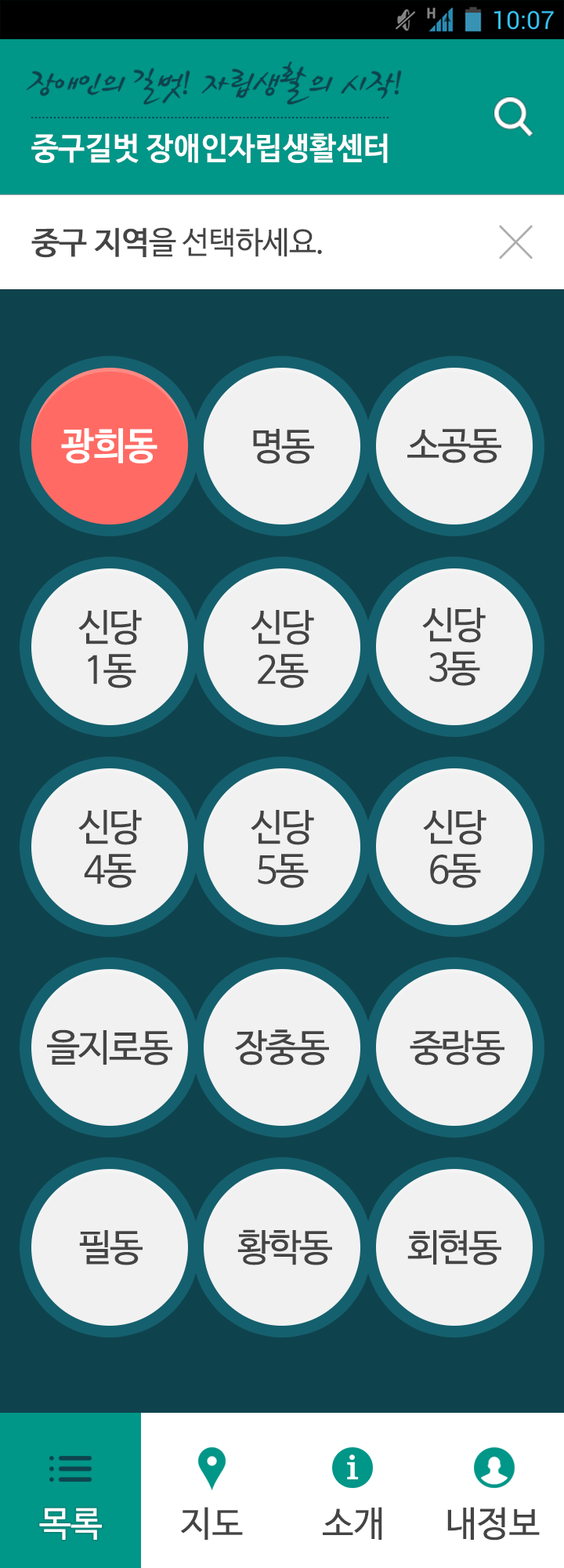
<style>
.page{position:relative;width:564px;height:1568px;background:#0e434d}
.page>*{position:absolute;margin:0}
.t1{font:31.4px "NanumBarunGothicOTFBold";letter-spacing:0.01em;color:#ffffff;scale:0.96 1}
.t2{font:31.4px "NanumBarunGothicOTF";letter-spacing:-0.02em;color:#444444}
.t3{font:31.4px "NanumBarunGothicOTF";letter-spacing:-0.02em;color:#444444;font-weight:bold}
.t4{font:37.6px "NanumBarunGothicOTFBold";letter-spacing:-0.025em;color:#ffffff}
.t5{font:37.6px "NanumBarunGothicOTF";letter-spacing:-0.05em;color:#444444}
.t6{font:37.6px/43.1px "NanumBarunGothicOTF";letter-spacing:-0.05em;color:#444444}
.t7{font:35.3px "NanumBarunGothicOTF";color:#ffffff}
.t8{font:35.3px "NanumBarunGothicOTF";color:#444444}
</style>
<div class="page">
<p class="t1" style="left:31px;top:133px;width:357px;height:30px">중구길벗 장애인자립생활센터</p>
<p class="t2" style="left:31px;top:227px;width:291px;height:31px"><span class="t3">중구 지역</span>을 선택하세요.</p>
<p class="t4" style="left:61px;top:428px;width:97px;height:35px">광희동</p>
<p class="t5" style="left:253px;top:429px;width:61px;height:35px">명동</p>
<p class="t5" style="left:408px;top:429px;width:94px;height:34px">소공동</p>
<p class="t6" style="left:78px;top:610px;width:64px;height:78px;text-align:center">신당<br>1동</p>
<p class="t6" style="left:251px;top:610px;width:63px;height:78px;text-align:center">신당<br>2동</p>
<p class="t6" style="left:423px;top:608px;width:63px;height:78px;text-align:center">신당<br>3동</p>
<p class="t6" style="left:78px;top:810px;width:64px;height:78px;text-align:center">신당<br>4동</p>
<p class="t6" style="left:251px;top:810px;width:63px;height:78px;text-align:center">신당<br>5동</p>
<p class="t6" style="left:423px;top:810px;width:64px;height:78px;text-align:center">신당<br>6동</p>
<p class="t5" style="left:47px;top:1029px;width:125px;height:36px">을지로동</p>
<p class="t5" style="left:235px;top:1029px;width:94px;height:36px">장충동</p>
<p class="t5" style="left:410px;top:1030px;width:95px;height:35px">중랑동</p>
<p class="t5" style="left:238px;top:1229px;width:94px;height:36px">황학동</p>
<p class="t5" style="left:79px;top:1230px;width:64px;height:35px">필동</p>
<p class="t5" style="left:408px;top:1230px;width:94px;height:35px">회현동</p>
<p class="t7" style="left:39px;top:1508px;width:63px;height:32px">목록</p>
<p class="t8" style="left:181px;top:1507px;width:62px;height:33px">지도</p>
<p class="t8" style="left:323px;top:1507px;width:60px;height:33px">소개</p>
<p class="t8" style="left:448px;top:1507px;width:92px;height:34px">내정보</p>
</div>
